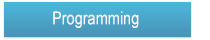
<style>
.page{position:relative;width:210px;height:40px}
.page>*{position:absolute;margin:0}
.t1{font:17.8px "ArialMT";color:#fcfcfc;scale:0.82 1}
</style>
<div class="page">
<p class="t1" style="left:53px;top:11px;width:86px;height:17px">Programming</p>
</div>
